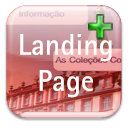
<style>
.page{position:relative;width:130px;height:130px;background:#ffffff}
.page>*{position:absolute;margin:0}
.t1{font:30px/36px "MerckSansSerifPro-Bold";color:#ffffff}
</style>
<div class="page">
<p class="t1" style="left:20px;top:34px;width:92px;height:64px;text-align:center">Landing<br>Page</p>
</div>
